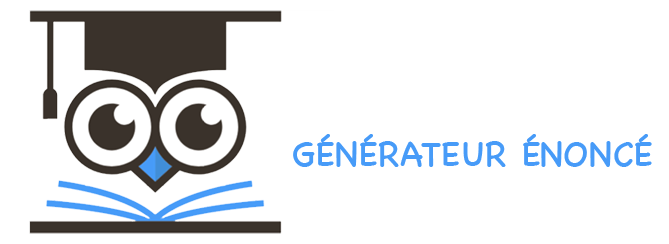
<style>
.page{position:relative;width:669px;height:244px;background:#ffffff}
.page>*{position:absolute;margin:0}
.t1{font:35.6px "ChalkboardSE-Regular";color:#479bf8;text-transform:uppercase}
</style>
<div class="page">
<p class="t1" style="left:293px;top:134px;width:359px;height:33px">générateur énoncé</p>
</div>
